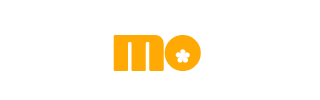
<style>
.page{position:relative;width:320px;height:100px;background:#ffffff}
.page>*{position:absolute;margin:0}
.t1{font:72px "Chick";color:#ffa904}
</style>
<div class="page">
<p class="t1" style="left:113px;top:35px;width:88px;height:36px">MO</p>
</div>
